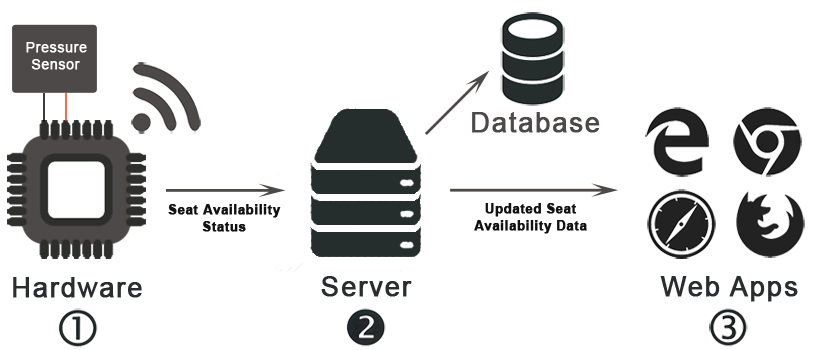
<style>
.page{position:relative;width:813px;height:350px;background:#ffffff}
.page>*{position:absolute;margin:0}
.t1{font:13.6px "ArialMT";letter-spacing:0.045em;color:#ffffff;font-weight:bold}
.t2{font:27.1px "ArialMT";letter-spacing:0.045em;color:#4d4948;font-weight:bold}
.t3{font:12.7px/16.9px "Arial-BoldMT";letter-spacing:0.045em;color:#111111;font-weight:bold}
.t4{font:27.1px "ArialMT";letter-spacing:0.045em;color:#292d2f;font-weight:bold}
</style>
<div class="page">
<p class="t1" style="left:26px;top:42px;width:61px;height:11px">Pressure</p>
<p class="t1" style="left:31px;top:59px;width:49px;height:11px">Sensor</p>
<p class="t2" style="left:472px;top:112px;width:128px;height:21px">Database</p>
<p class="t3" style="left:168px;top:204px;width:113px;height:28px;text-align:center">Seat Availability<br>Status</p>
<p class="t3" style="left:474px;top:203px;width:113px;height:31px;text-align:center">Updated Seat<br>Availability Data</p>
<p class="t4" style="left:13px;top:277px;width:129px;height:21px">Hardware</p>
<p class="t4" style="left:321px;top:276px;width:91px;height:21px">Server</p>
<p class="t4" style="left:660px;top:276px;width:138px;height:26px">Web Apps</p>
</div>
